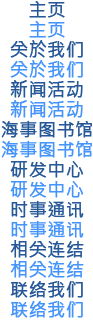
<style>
.page{position:relative;width:93px;height:320px;background:#ffffff}
.page>*{position:absolute;margin:0}
.t1{font:18px/20px "MicrosoftJhengHeiRegular";letter-spacing:0.01em;color:#265797;font-weight:bold}
.t2{font:18px/20px "MicrosoftJhengHeiRegular";letter-spacing:0.01em;color:#4594fa;font-weight:bold}
</style>
<div class="page">
<p class="t1" style="left:1px;top:1px;width:91px;height:317px;text-align:center">主页<br><span class="t2">主页<br></span>关於我们<br><span class="t2">关於我们<br></span>新闻活动<br><span class="t2">新闻活动<br></span>海事图书馆<br><span class="t2">海事图书馆<br></span>研发中心<br><span class="t2">研发中心<br></span>时事通讯<br><span class="t2">时事通讯<br></span>相关连结<br><span class="t2">相关连结<br></span>联络我们<br><span class="t2">联络我们</span></p>
</div>
